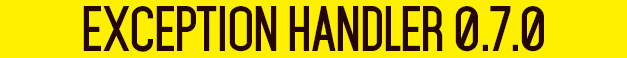
<style>
.page{position:relative;width:627px;height:58px;background:#fff000}
.page>*{position:absolute;margin:0}
.t1{font:55px "Mohave-Bold";letter-spacing:-0.025em;color:#240404;text-transform:uppercase}
</style>
<div class="page">
<p class="t1" style="left:83px;top:6px;width:461px;height:46px">Exception Handler 0.7.0</p>
</div>
